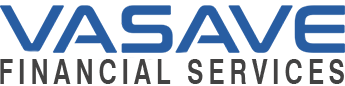
<style>
.page{position:relative;width:345px;height:86px;background:#ffffff}
.page>*{position:absolute;margin:0}
.t1{font:34.1px "Swiss721BT-Bold";letter-spacing:0.2em;color:#434242;text-transform:uppercase;scale:0.72 1}
</style>
<div class="page">
<p class="t1" style="left:0px;top:59px;width:344px;height:25px">FINANCIAL SERVICES</p>
</div>
